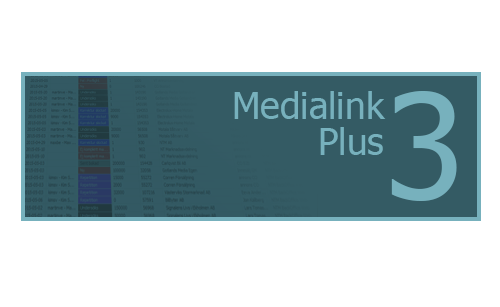
<style>
.page{position:relative;width:500px;height:307px;background:#ffffff}
.page>*{position:absolute;margin:0}
.t1{font:37px/36px "Tahoma";color:#77b1bd}
.t2{font:146px "Tahoma";color:#77b1bd}
</style>
<div class="page">
<p class="t1" style="left:234px;top:91px;width:152px;height:64px;text-align:right">Medialink<br>Plus</p>
<p class="t2" style="left:391px;top:91px;width:66px;height:110px">3</p>
</div>
